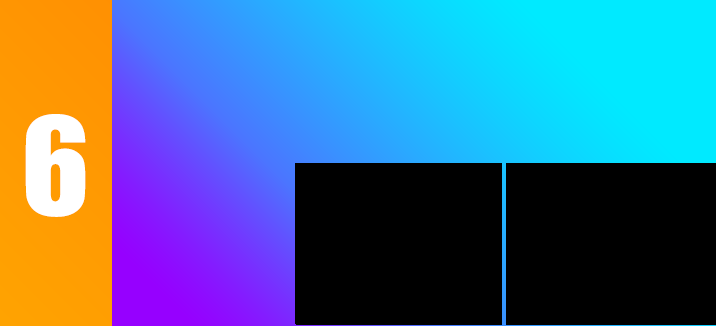
<style>
.page{position:relative;width:716px;height:326px;background:#000000}
.page>*{position:absolute;margin:0}
.t1{font:125px "Impact";color:#ffffff}
</style>
<div class="page">
<p class="t1" style="left:25px;top:114px;width:61px;height:103px">6</p>
</div>
